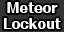
<style>
.page{position:relative;width:64px;height:32px;background:#333333}
.page>*{position:absolute;margin:0}
.t1{font:13.7px "FolkPro-Heavy";color:#ffffff}
</style>
<div class="page">
<p class="t1" style="left:4px;top:2px;width:57px;height:27px;text-align:center">Meteor<br>Lockout</p>
</div>
